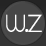
<style>
.page{position:relative;width:46px;height:46px;background:#474747}
.page>*{position:absolute;margin:0}
.t1{font:24.5px "Donovan-Regular";color:#ffffff}
.t2{font:24.5px "Donovan-Regular";color:#ffffff;scale:0.74 1}
</style>
<div class="page">
<p class="t1" style="left:6px;top:14px;width:36px;height:18px"><span class="t2">w</span>.z</p>
</div>
